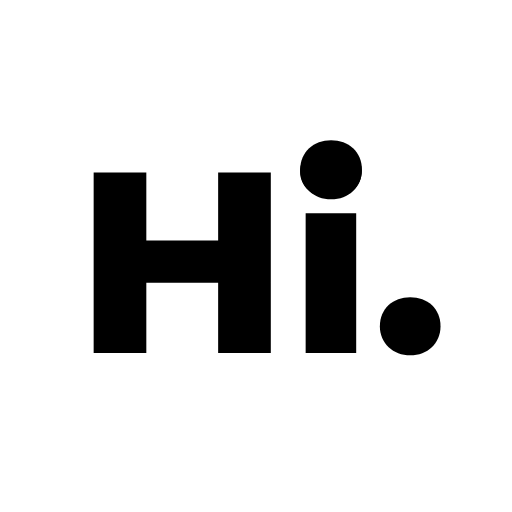
<style>
.page{position:relative;width:512px;height:512px;background:#ffffff}
.page>*{position:absolute;margin:0}
.t1{font:257.7px "Montserrat-ExtraBold";color:#000000;scale:1.03 1}
.t2{font:262.3px "Montserrat-ExtraBold";color:#000000;scale:1.03 1}
</style>
<div class="page">
<p class="t1" style="left:93px;top:145px;width:348px;height:211px">Hi.</p>
<p class="t2" style="left:300px;top:140px;width:62px;height:60px">.</p>
</div>
